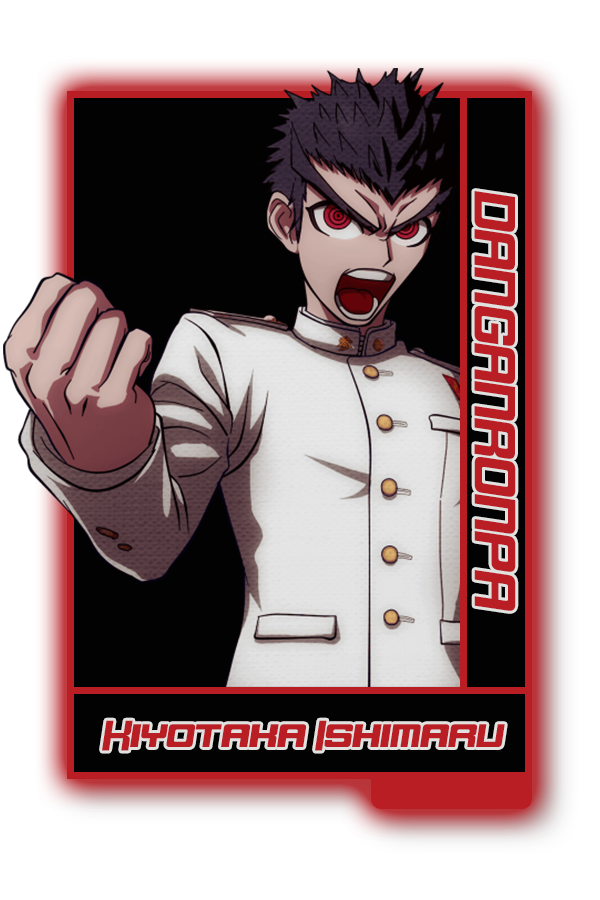
<style>
.page{position:relative;width:600px;height:900px;background:#020202}
.page>*{position:absolute;margin:0}
.t1{font:48.8px "DorBlue";color:#bb2c2e}
.t2{font:35.7px "DorBlue";color:#bb2c2e}
</style>
<div class="page">
<p class="t1" style="left:474px;top:191px;width:42px;height:420px;rotate:90deg">DANGANRONPA</p>
<p class="t2" style="left:102px;top:720px;width:403px;height:31px">Kiyotaka Ishimaru</p>
</div>
